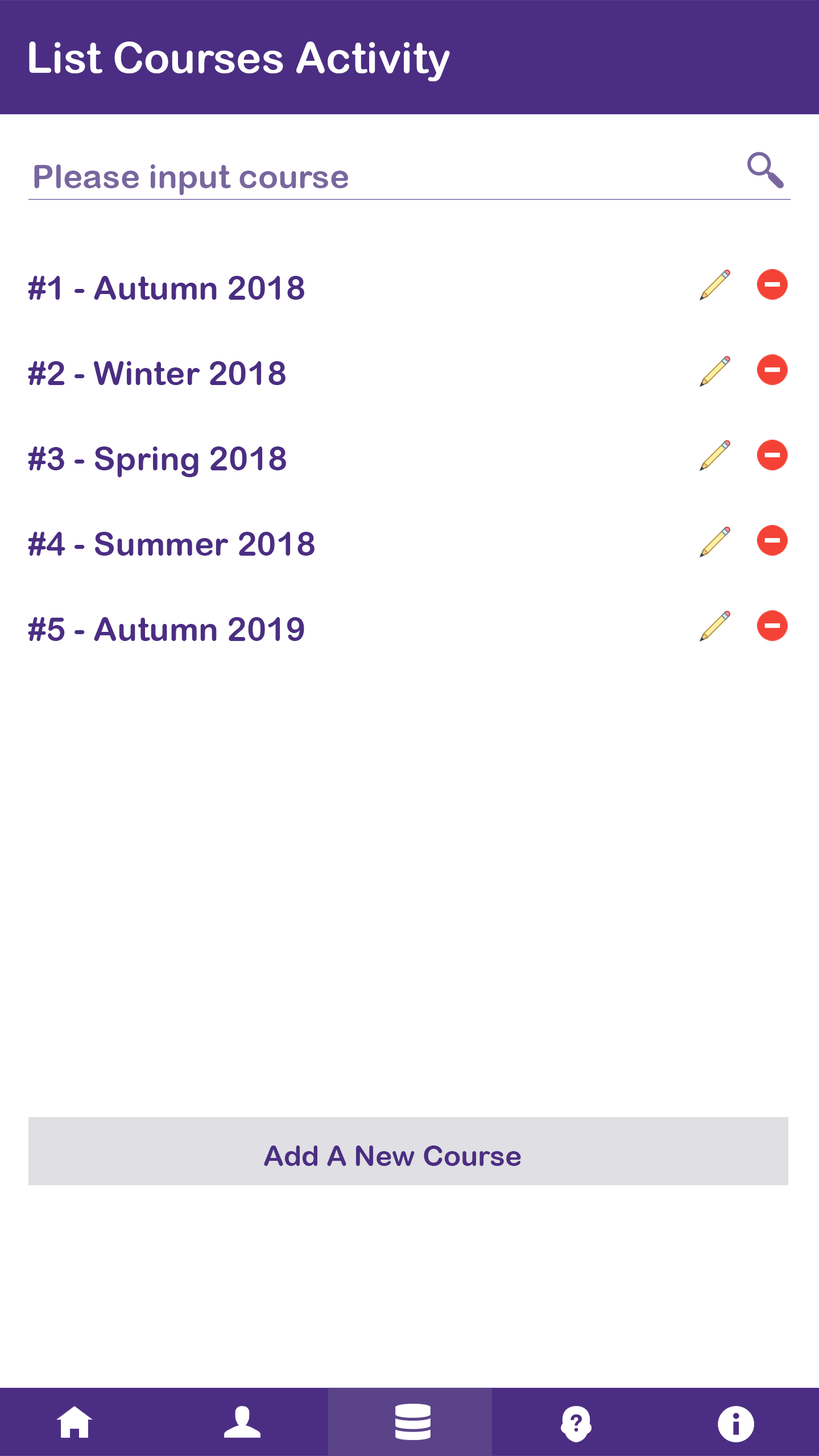
<style>
.page{position:relative;width:819px;height:1456px;background:#ffffff}
.page>*{position:absolute;margin:0}
.t1{font:42.7px "ArialRoundedMTBold";color:#ffffff}
.t2{font:33.2px "ArialRoundedMTBold";color:#78679f}
.t3{font:33.2px "ArialRoundedMTBold";color:#4b2e83}
.t4{font:28.4px "ArialRoundedMTBold";color:#4b2e83}
</style>
<div class="page">
<p class="t1" style="left:29px;top:42px;width:421px;height:39px">List Courses Activity</p>
<p class="t2" style="left:34px;top:164px;width:314px;height:31px">Please input course</p>
<p class="t3" style="left:28px;top:276px;width:276px;height:24px">#1 - Autumn 2018</p>
<p class="t3" style="left:28px;top:361px;width:258px;height:24px">#2 - Winter 2018</p>
<p class="t3" style="left:28px;top:446px;width:258px;height:31px">#3 - Spring 2018</p>
<p class="t3" style="left:28px;top:532px;width:287px;height:24px">#4 - Summer 2018</p>
<p class="t3" style="left:28px;top:617px;width:276px;height:24px">#5 - Autumn 2019</p>
<p class="t4" style="left:264px;top:1145px;width:257px;height:21px">Add A New Course</p>
</div>
